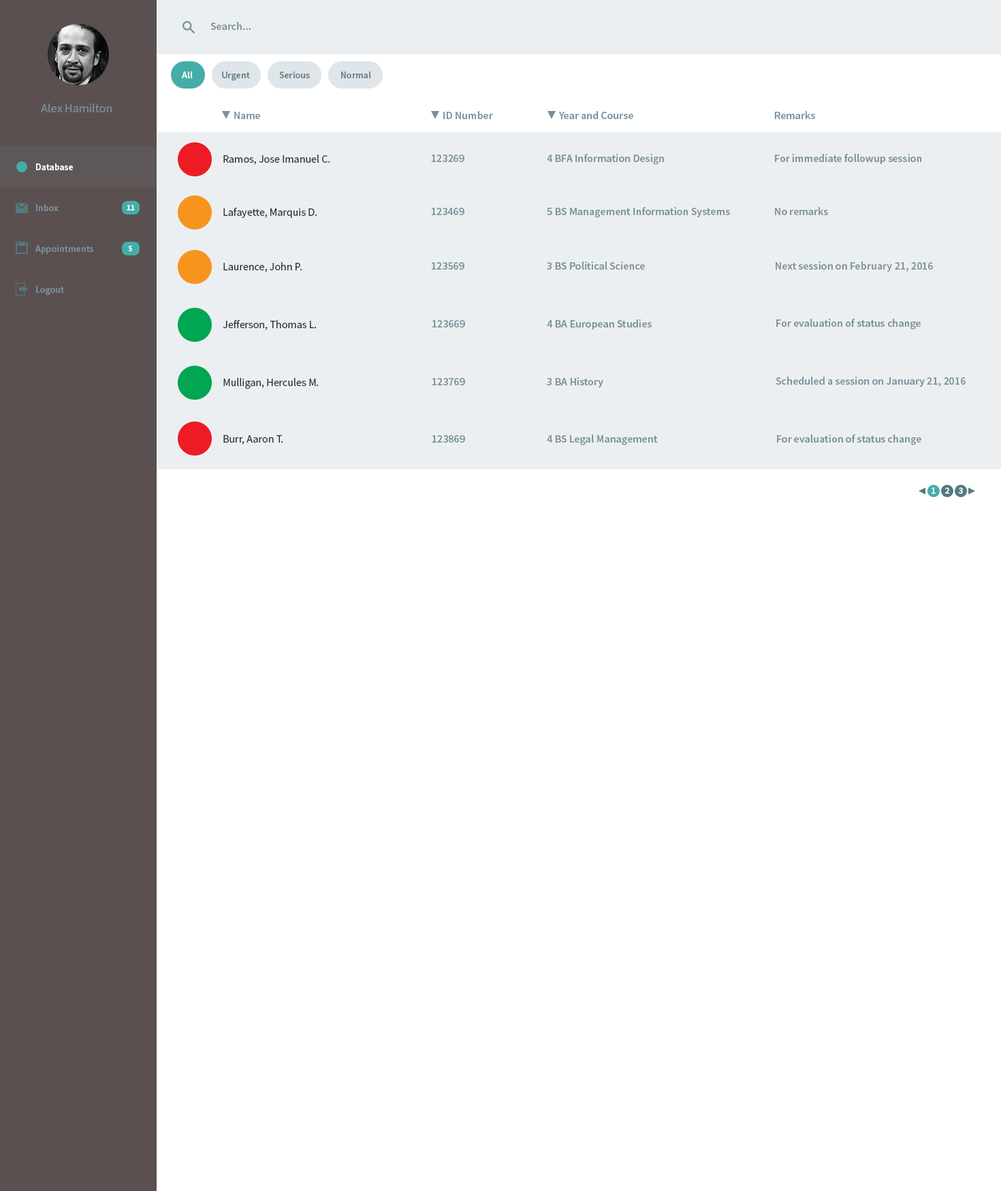
<style>
.page{position:relative;width:1001px;height:1191px;background:#ffffff}
.page>*{position:absolute;margin:0}
.t1{font:10.9px "SourceSansPro-Semibold";color:#78909c}
.t2{font:9.5px "SourceSansPro-Semibold";color:#ffffff}
.t3{font:9.5px "SourceSansPro-Semibold";color:#6b818c}
.t4{font:12.3px "SourceSansPro-Regular";color:#78909c}
.t5{font:10.7px "SourceSansPro-Semibold";color:#78909c}
.t6{font:10.9px "SourceSansPro-Regular";color:#263238}
.t7{font:9.5px "SourceSansPro-Semibold";color:#78909c}
.t8{font:8.2px "SourceSansPro-Bold";color:#f8fafb}
</style>
<div class="page">
<p class="t1" style="left:210px;top:22px;width:41px;height:8px">Search...</p>
<p class="t2" style="left:182px;top:72px;width:11px;height:6px">All</p>
<p class="t3" style="left:222px;top:72px;width:28px;height:9px">Urgent</p>
<p class="t3" style="left:279px;top:72px;width:31px;height:6px">Serious</p>
<p class="t3" style="left:341px;top:72px;width:30px;height:6px">Normal</p>
<p class="t4" style="left:41px;top:104px;width:71px;height:8px">Alex Hamilton</p>
<p class="t5" style="left:234px;top:112px;width:26px;height:7px">Name</p>
<p class="t5" style="left:443px;top:111px;width:50px;height:8px">ID Number</p>
<p class="t5" style="left:558px;top:111px;width:75px;height:8px">Year and Course</p>
<p class="t5" style="left:774px;top:111px;width:41px;height:8px">Remarks</p>
<p class="t6" style="left:223px;top:155px;width:107px;height:10px">Ramos, Jose Imanuel C.</p>
<p class="t1" style="left:431px;top:155px;width:33px;height:7px">123269</p>
<p class="t1" style="left:547px;top:154px;width:117px;height:11px">4 BFA Information Design</p>
<p class="t1" style="left:775px;top:154px;width:147px;height:10px">For immediate followup session</p>
<p class="t2" style="left:36px;top:163px;width:37px;height:7px">Database</p>
<p class="t7" style="left:36px;top:204px;width:23px;height:7px">Inbox</p>
<p class="t8" style="left:127px;top:205px;width:8px;height:5px">11</p>
<p class="t6" style="left:223px;top:208px;width:94px;height:10px">Lafayette, Marquis D.</p>
<p class="t1" style="left:431px;top:208px;width:33px;height:7px">123469</p>
<p class="t1" style="left:547px;top:207px;width:183px;height:11px">5 BS Management Information Systems</p>
<p class="t1" style="left:775px;top:207px;width:53px;height:8px">No remarks</p>
<p class="t7" style="left:35px;top:245px;width:58px;height:9px">Appointments</p>
<p class="t8" style="left:128px;top:246px;width:4px;height:5px">5</p>
<p class="t6" style="left:223px;top:262px;width:79px;height:10px">Laurence, John P.</p>
<p class="t1" style="left:431px;top:262px;width:33px;height:8px">123569</p>
<p class="t1" style="left:547px;top:262px;width:98px;height:8px">3 BS Political Science</p>
<p class="t1" style="left:776px;top:262px;width:157px;height:10px">Next session on February 21, 2016</p>
<p class="t7" style="left:36px;top:286px;width:28px;height:10px">Logout</p>
<p class="t6" style="left:223px;top:320px;width:94px;height:10px">Jefferson, Thomas L.</p>
<p class="t1" style="left:432px;top:320px;width:33px;height:8px">123669</p>
<p class="t1" style="left:547px;top:319px;width:105px;height:11px">4 BA European Studies</p>
<p class="t1" style="left:776px;top:319px;width:145px;height:11px">For evaluation of status change</p>
<p class="t6" style="left:223px;top:378px;width:96px;height:11px">Mulligan, Hercules M.</p>
<p class="t1" style="left:432px;top:378px;width:33px;height:7px">123769</p>
<p class="t1" style="left:547px;top:377px;width:56px;height:11px">3 BA History</p>
<p class="t1" style="left:776px;top:377px;width:190px;height:10px">Scheduled a session on January 21, 2016</p>
<p class="t6" style="left:223px;top:435px;width:60px;height:10px">Burr, Aaron T.</p>
<p class="t1" style="left:432px;top:435px;width:33px;height:8px">123869</p>
<p class="t1" style="left:547px;top:434px;width:111px;height:11px">4 BS Legal Management</p>
<p class="t1" style="left:777px;top:434px;width:144px;height:11px">For evaluation of status change</p>
<p class="t2" style="left:932px;top:488px;width:4px;height:6px">1</p>
<p class="t2" style="left:945px;top:488px;width:5px;height:6px">2</p>
<p class="t2" style="left:958px;top:488px;width:5px;height:6px">3</p>
</div>
